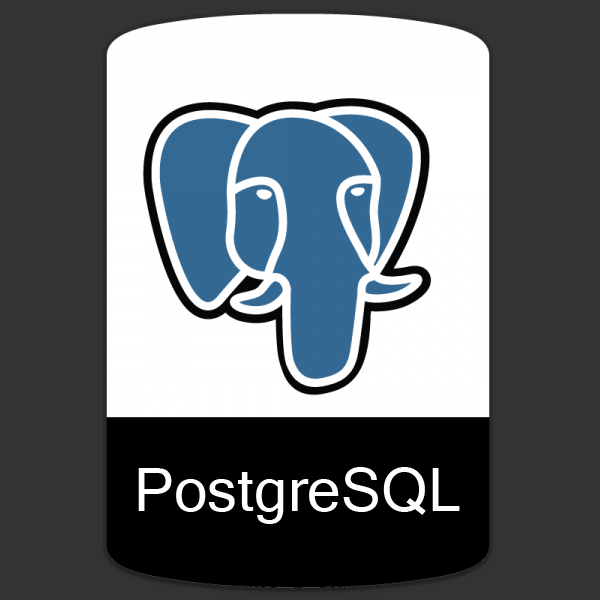
<style>
.page{position:relative;width:600px;height:600px;background:#333333}
.page>*{position:absolute;margin:0}
.t1{font:60px "MicrosoftSansSerif";color:#ffffff}
</style>
<div class="page">
<p class="t1" style="left:138px;top:467px;width:322px;height:57px">PostgreSQL</p>
</div>
